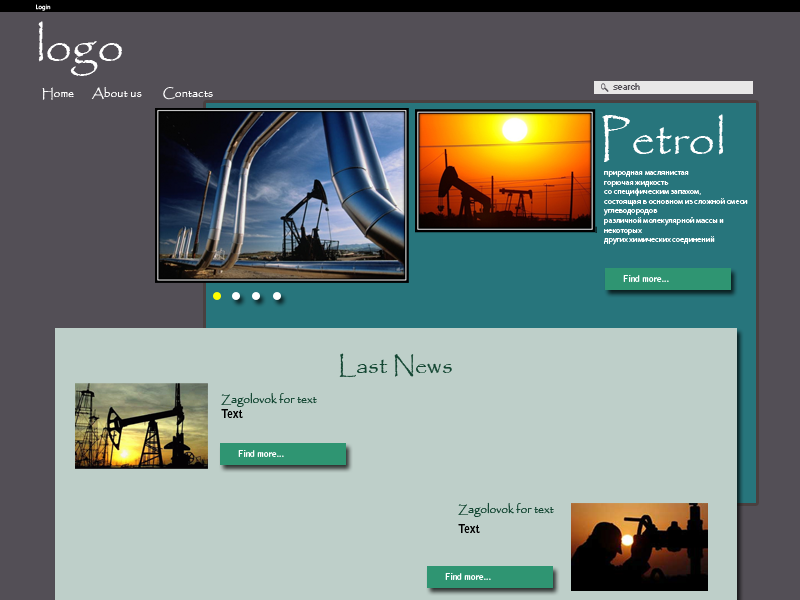
<style>
.page{position:relative;width:800px;height:600px;background:#becfc9}
.page>*{position:absolute;margin:0}
.t1{font:6px "SegoeUI";color:#ffffff}
.t2{font:48px "Papyrus-Regular";color:#ffffff}
.t3{font:12px "Papyrus-Regular";color:#ffffff}
.t4{font:9px "Small Fonts";color:#534f56}
.t5{font:8px "MyriadPro-Regular";color:#ffffff}
.t6{font:8px "Papyrus-Regular";color:#ffffff}
.t7{font:24px "Papyrus-Regular";color:#134632}
.t8{font:12px "Papyrus-Regular";color:#134632}
.t9{font:12px "BellGothicStd-Bold";color:#000000}
</style>
<div class="page">
<p class="t1" style="left:36px;top:4px;width:15px;height:7px">Login</p>
<p class="t2" style="left:38px;top:21px;width:84px;height:55px">logo</p>
<p class="t3" style="left:42px;top:87px;width:32px;height:13px">Home</p>
<p class="t3" style="left:91px;top:87px;width:51px;height:13px">About us</p>
<p class="t3" style="left:163px;top:87px;width:50px;height:13px">Contacts</p>
<p class="t4" style="left:613px;top:83px;width:27px;height:7px">search</p>
<p class="t2" style="left:602px;top:114px;width:122px;height:48px">Petrol</p>
<p class="t5" style="left:603px;top:171px;width:145px;height:74px">природная маслянистая <br>горючая жидкость <br>со специфическим запахом<span class="t6">, <br></span>состоящая в основном из сложной смеси <br>углеводородов <br>различной молекулярной массы и <br>некоторых <br>других химических соединений</p>
<p class="t7" style="left:339px;top:353px;width:113px;height:25px">Last News</p>
<p class="t8" style="left:221px;top:392px;width:96px;height:15px">Zagolovok for text</p>
<p class="t9" style="left:221px;top:409px;width:22px;height:9px">Text</p>
<p class="t8" style="left:458px;top:502px;width:96px;height:15px">Zagolovok for text</p>
<p class="t9" style="left:458px;top:524px;width:22px;height:9px">Text</p>
</div>
